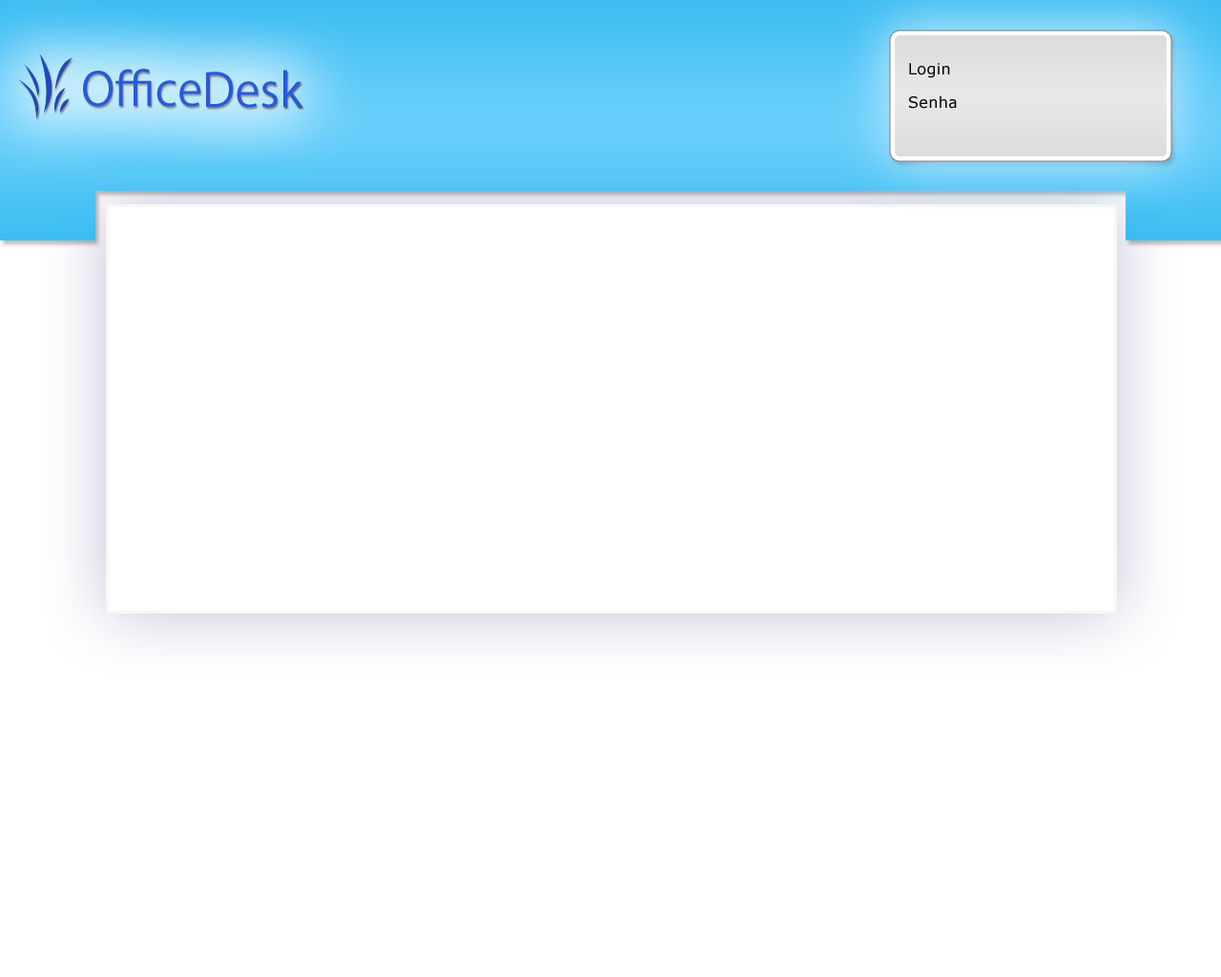
<style>
.page{position:relative;width:1221px;height:977px;background:#ffffff}
.page>*{position:absolute;margin:0}
.t1{font:15.3px "Verdana";letter-spacing:0.025em;color:#000000}
</style>
<div class="page">
<p class="t1" style="left:909px;top:63px;width:41px;height:15px">Login</p>
<p class="t1" style="left:909px;top:95px;width:48px;height:14px">Senha</p>
</div>
